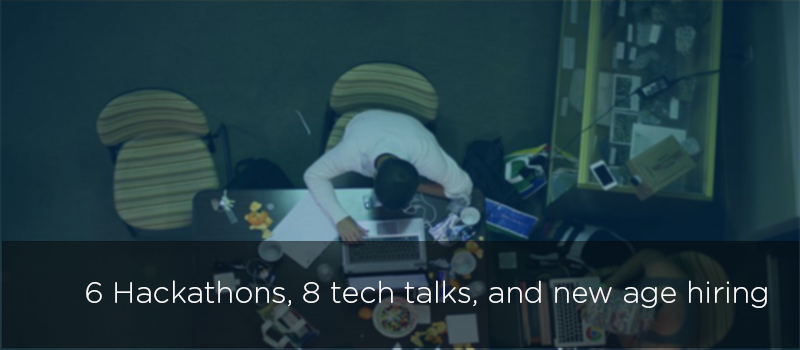
<style>
.page{position:relative;width:800px;height:350px}
.page>*{position:absolute;margin:0}
.t1{font:30px "GothamRounded-Light";color:#f6f6f6}
</style>
<div class="page">
<p class="t1" style="left:86px;top:280px;width:681px;height:28px">6 Hackathons, 8 tech talks, and new age hiring</p>
</div>
